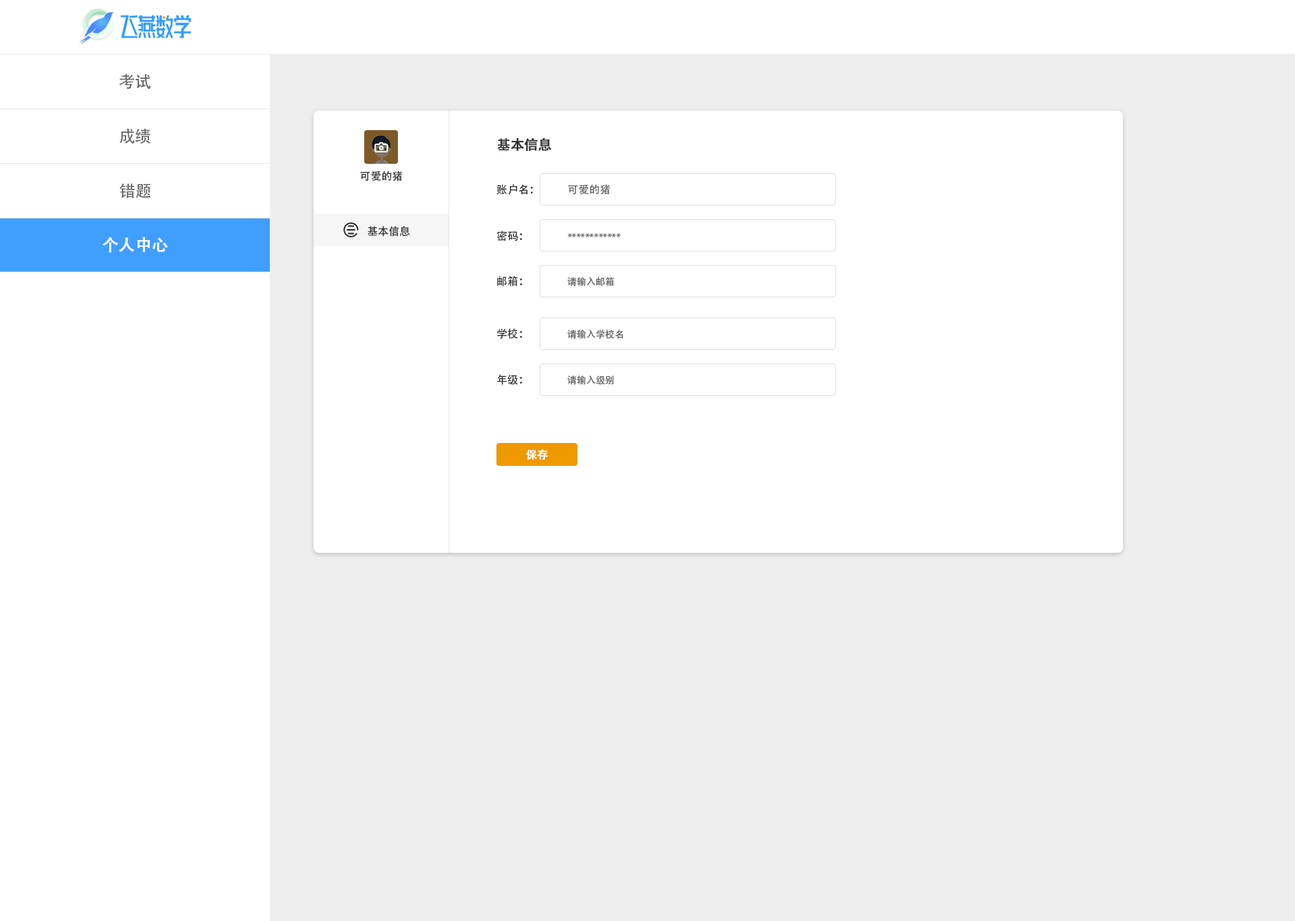
<style>
.page{position:relative;width:1295px;height:921px;background:#ffffff}
.page>*{position:absolute;margin:0}
.t1{font:16.2px "AdobeHeitiStd-Regular";color:#666666}
.t2{font:13.5px "AdobeHeitiStd-Regular";color:#333333;font-weight:bold}
.t3{font:10.8px "AdobeHeitiStd-Regular";color:#333333}
.t4{font:10.8px "AdobeHeitiStd-Regular";color:#666666}
.t5{font:9.4px "AdobeHeitiStd-Regular";color:#666666}
.t6{font:16.2px "AdobeHeitiStd-Regular";color:#ffffff;font-weight:bold}
.t7{font:10.8px "AdobeHeitiStd-Regular";color:#ffffff;font-weight:bold}
</style>
<div class="page">
<p class="t1" style="left:119px;top:73px;width:32px;height:16px">考试</p>
<p class="t1" style="left:119px;top:128px;width:31px;height:16px">成绩</p>
<p class="t2" style="left:497px;top:138px;width:55px;height:13px">基本信息</p>
<p class="t3" style="left:360px;top:171px;width:43px;height:10px">可爱的猪</p>
<p class="t1" style="left:119px;top:183px;width:32px;height:15px">错题</p>
<p class="t3" style="left:496px;top:184px;width:37px;height:11px">账户名：</p>
<p class="t4" style="left:568px;top:184px;width:42px;height:11px">可爱的猪</p>
<p class="t3" style="left:367px;top:226px;width:43px;height:11px">基本信息</p>
<p class="t3" style="left:496px;top:231px;width:26px;height:10px">密码：</p>
<p class="t5" style="left:568px;top:233px;width:52px;height:4px">************</p>
<p class="t6" style="left:102px;top:237px;width:66px;height:16px">个人中心</p>
<p class="t3" style="left:497px;top:276px;width:25px;height:11px">邮箱：</p>
<p class="t5" style="left:567px;top:276px;width:47px;height:11px">请输入邮箱</p>
<p class="t3" style="left:497px;top:328px;width:25px;height:11px">学校：</p>
<p class="t5" style="left:567px;top:330px;width:56px;height:9px">请输入学校名</p>
<p class="t3" style="left:497px;top:374px;width:25px;height:11px">年级：</p>
<p class="t5" style="left:567px;top:376px;width:47px;height:9px">请输入级别</p>
<p class="t7" style="left:526px;top:449px;width:22px;height:11px">保存</p>
</div>
